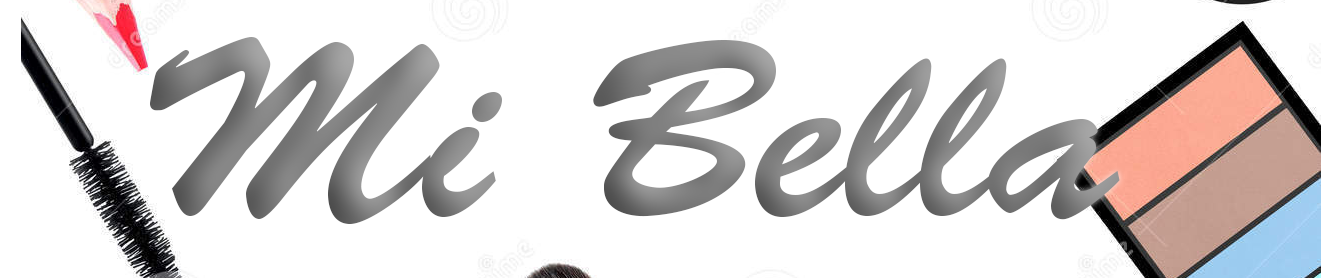
<style>
.page{position:relative;width:1336px;height:278px;background:#ffffff}
.page>*{position:absolute;margin:0}
.t1{font:250px "BrushScriptStd";color:#7f7f7f}
</style>
<div class="page">
<p class="t1" style="left:150px;top:37px;width:970px;height:187px">Mi Bella</p>
</div>
